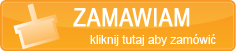
<style>
.page{position:relative;width:236px;height:51px}
.page>*{position:absolute;margin:0}
.t1{font:25px "ArialNarrow";color:#ffffff;text-transform:uppercase;font-weight:bold}
.t2{font:12px "ArialMT";color:#ffffff}
</style>
<div class="page">
<p class="t1" style="left:73px;top:8px;width:117px;height:19px">Zamawiam</p>
<p class="t2" style="left:90px;top:34px;width:126px;height:12px">kliknij tutaj aby zamówić</p>
</div>
